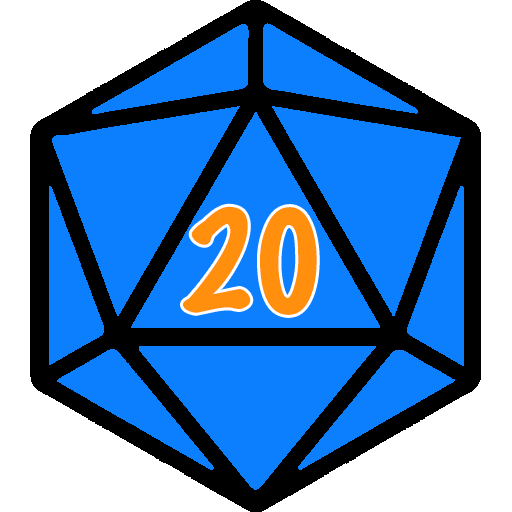
<style>
.page{position:relative;width:512px;height:512px;background:#0b7ffe}
.page>*{position:absolute;margin:0}
.t1{font:127.1px "MarkerFelt-Thin";color:#ff8f0c}
</style>
<div class="page">
<p class="t1" style="left:183px;top:206px;width:134px;height:109px">20</p>
</div>
